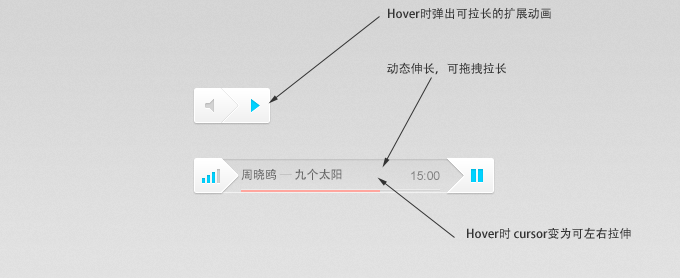
<style>
.page{position:relative;width:680px;height:278px}
.page>*{position:absolute;margin:0}
.t1{font:12px "AdobeHeitiStd-Regular";color:#333333}
.t2{font:12px "AdobeHeitiStd-Regular";color:#666666}
.t3{font:12px "AdobeHeitiStd-Regular";color:#bbbbbb}
.t4{font:12px "ArialMT";color:#808080}
</style>
<div class="page">
<p class="t1" style="left:388px;top:7px;width:163px;height:12px">Hover时弹出可拉长的扩展动画</p>
<p class="t1" style="left:387px;top:62px;width:119px;height:13px">动态伸长，可拖拽拉长</p>
<p class="t2" style="left:241px;top:168px;width:101px;height:12px">周晓鸥 <span class="t3">— </span>九个太阳</p>
<p class="t4" style="left:411px;top:171px;width:29px;height:9px">15:00</p>
<p class="t1" style="left:467px;top:227px;width:164px;height:12px">Hover时 cursor变为可左右拉伸</p>
</div>
